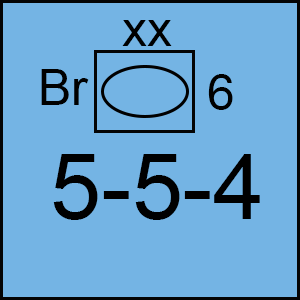
<style>
.page{position:relative;width:300px;height:300px;background:#74b4e4}
.page>*{position:absolute;margin:0}
.t1{font:50px "ArialMT";color:#000000}
.t2{font:91.7px "ArialMT";color:#000000}
</style>
<div class="page">
<p class="t1" style="left:122px;top:20px;width:50px;height:26px">xx</p>
<p class="t1" style="left:41px;top:69px;width:48px;height:36px">Br</p>
<p class="t1" style="left:208px;top:74px;width:25px;height:36px">6</p>
<p class="t2" style="left:53px;top:154px;width:207px;height:66px">5-5-4</p>
</div>
